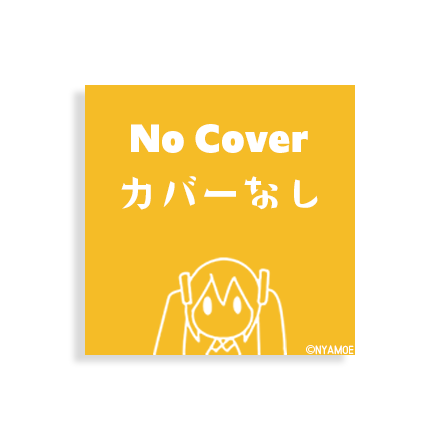
<style>
.page{position:relative;width:440px;height:440px;background:#ffffff}
.page>*{position:absolute;margin:0}
.t1{font:41.9px "Upgrade-Black";color:#ffffff}
.t2{font:41.9px "DonguriKn-R";color:#ffffff}
.t3{font:12px "YMFont-Regular";color:#ffffff}
.t4{font:12px "AdobeHeitiStd-Regular";color:#ffffff}
</style>
<div class="page">
<p class="t1" style="left:131px;top:124px;width:177px;height:29px">No Cover</p>
<p class="t2" style="left:121px;top:176px;width:197px;height:34px">カバーなし</p>
<p class="t3" style="left:306px;top:345px;width:48px;height:10px"><span class="t4">©</span>Nyamoe</p>
</div>
